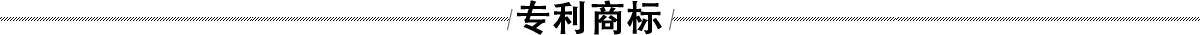
<style>
.page{position:relative;width:1200px;height:35px;background:#ffffff}
.page>*{position:absolute;margin:0}
.t1{font:36px "AdobeHeitiStd-Regular";color:#000000;font-weight:bold}
</style>
<div class="page">
<p class="t1" style="left:517px;top:0px;width:145px;height:35px">专利商标</p>
</div>
